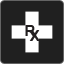
<style>
.page{position:relative;width:64px;height:64px;background:#202020}
.page>*{position:absolute;margin:0}
.t1{font:15px "Arial-BoldMT";color:#231f20}
</style>
<div class="page">
<p class="t1" style="left:25px;top:25px;width:10px;height:11px">R</p>
<p class="t1" style="left:29px;top:30px;width:11px;height:11px">X</p>
</div>
